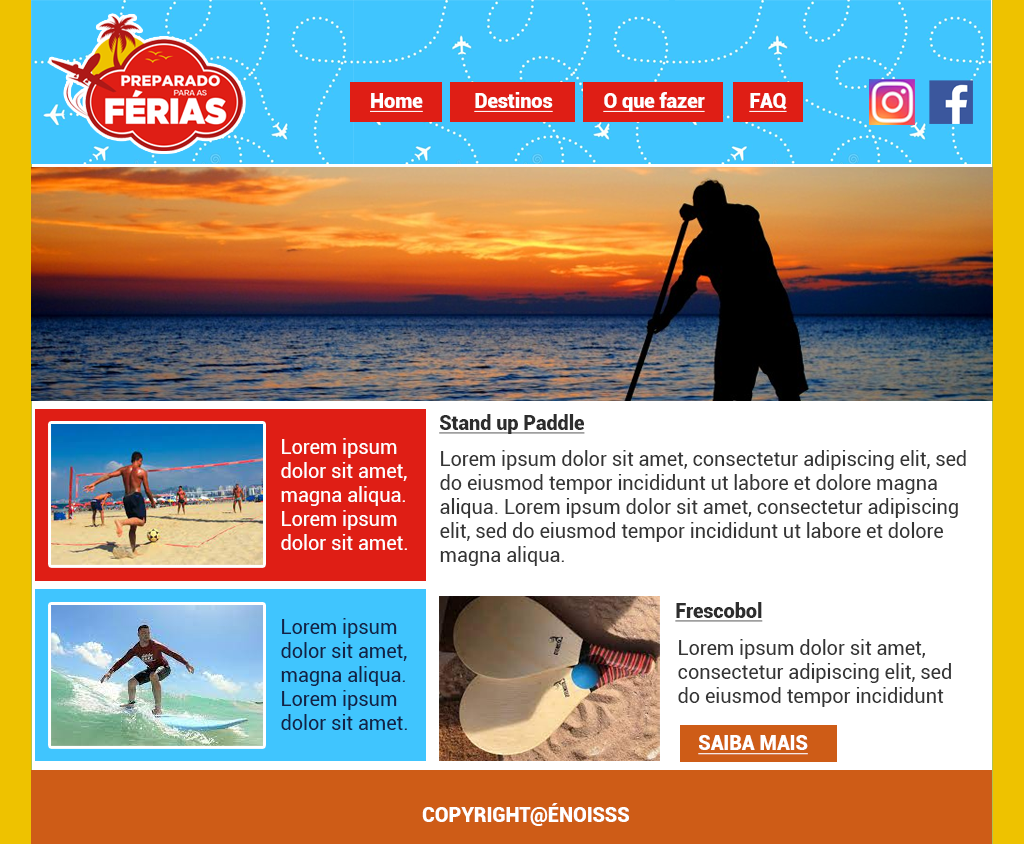
<style>
.page{position:relative;width:1024px;height:844px;background:#ffffff}
.page>*{position:absolute;margin:0}
.t1{font:20px "Roboto-Black";letter-spacing:-0.005em;color:#ffffff;text-decoration:underline}
.t2{font:20px "Roboto-Black";letter-spacing:-0.005em;color:#2d2d2d;text-decoration:underline}
.t3{font:20px/24px "Roboto-Regular";letter-spacing:-0.005em;color:#ffffff}
.t4{font:20px/24px "Roboto-Regular";letter-spacing:-0.005em;color:#353535}
.t5{font:20px/24px "Roboto-Regular";letter-spacing:-0.005em;color:#132246}
.t6{font:20px "Roboto-Black";letter-spacing:-0.005em;color:#ffffff}
</style>
<div class="page">
<p class="t1" style="left:370px;top:93px;width:53px;height:19px">Home</p>
<p class="t1" style="left:474px;top:92px;width:79px;height:20px">Destinos</p>
<p class="t1" style="left:603px;top:92px;width:102px;height:20px">O que fazer</p>
<p class="t1" style="left:749px;top:93px;width:38px;height:19px">FAQ</p>
<p class="t2" style="left:439px;top:414px;width:146px;height:20px">Stand up Paddle</p>
<p class="t3" style="left:281px;top:438px;width:126px;height:112px">Lorem ipsum dolor sit amet,  magna aliqua. Lorem ipsum dolor sit amet.</p>
<p class="t4" style="left:440px;top:450px;width:526px;height:116px">Lorem ipsum dolor sit amet, consectetur adipiscing elit, sed do eiusmod tempor incididunt ut labore et dolore magna aliqua. Lorem ipsum dolor sit amet, consectetur adipiscing elit, sed do eiusmod tempor incididunt ut labore et dolore magna aliqua.</p>
<p class="t2" style="left:675px;top:602px;width:88px;height:20px">Frescobol</p>
<p class="t5" style="left:281px;top:618px;width:126px;height:112px">Lorem ipsum dolor sit amet,  magna aliqua. Lorem ipsum dolor sit amet.</p>
<p class="t4" style="left:678px;top:639px;width:273px;height:68px">Lorem ipsum dolor sit amet, consectetur adipiscing elit, sed do eiusmod tempor incididunt</p>
<p class="t1" style="left:698px;top:735px;width:110px;height:20px">SAIBA MAIS</p>
<p class="t6" style="left:422px;top:803px;width:207px;height:23px">COPYRIGHT@ÉNOISSS</p>
</div>
